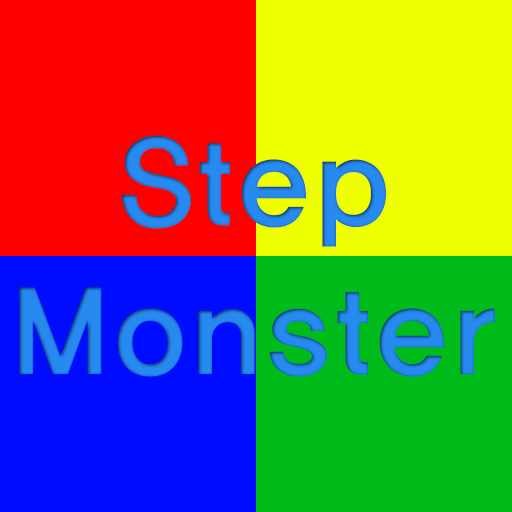
<style>
.page{position:relative;width:512px;height:512px;background:#f0ff00}
.page>*{position:absolute;margin:0}
.t1{font:124.2px "HaanYGodic24";letter-spacing:-0.025em;color:#278af0}
</style>
<div class="page">
<p class="t1" style="left:19px;top:135px;width:476px;height:242px;text-align:center">Step<br>Monster</p>
</div>
